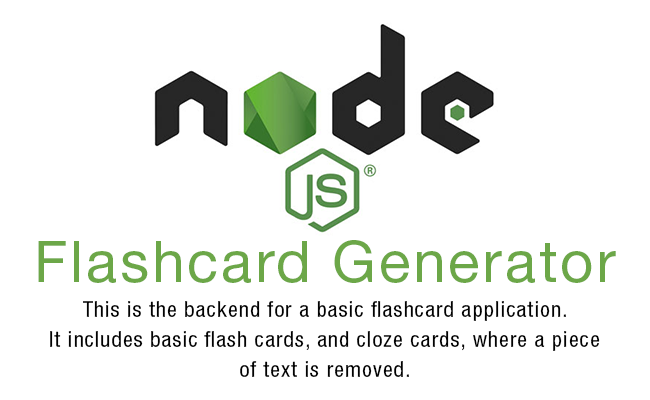
<style>
.page{position:relative;width:650px;height:400px;background:#ffffff}
.page>*{position:absolute;margin:0}
.t1{font:22px/30.1px "HelveticaNeueLTStd-Cn";letter-spacing:0.05em;color:#020202}
.t2{font:58px/72.1px "HelveticaNeueLTStd-Roman";letter-spacing:0.05em;color:#6ca748}
.t3{font:22px/35.1px "HelveticaNeueLTStd-Cn";letter-spacing:0.05em;color:#020202}
</style>
<div class="page">
<p class="t1" style="left:38px;top:240px;width:578px;height:137px;text-align:center"><span class="t2">Flashcard Generator<br></span><span class="t3">This is the backend for a basic flashcard application.<br></span>It includes basic flash cards, and cloze cards, where a piece<br>of text is removed.</p>
</div>
